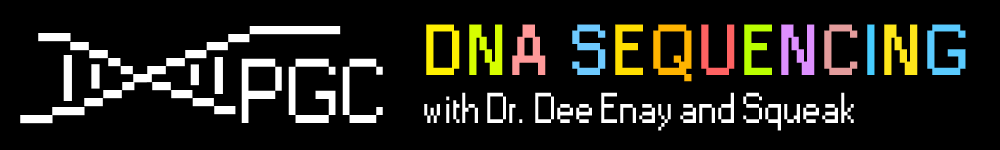
<style>
.page{position:relative;width:1000px;height:150px;background:#000000}
.page>*{position:absolute;margin:0}
.t1{font:40.4px "Small Fonts";color:#ffffff}
.t2{font:66.1px "Small Fonts";letter-spacing:0.1em;color:#fff000;font-weight:bold}
.t3{font:66.1px "Small Fonts";letter-spacing:0.1em;color:#d7fe00;font-weight:bold}
.t4{font:66.1px "Small Fonts";letter-spacing:0.1em;color:#ff9999;font-weight:bold}
.t5{font:66.1px "Small Fonts";letter-spacing:0.1em;color:#6ecaff;font-weight:bold}
.t6{font:66.1px "Small Fonts";letter-spacing:0.1em;color:#ffde00;font-weight:bold}
.t7{font:66.1px "Small Fonts";letter-spacing:0.1em;color:#ffb400;font-weight:bold}
.t8{font:66.1px "Small Fonts";letter-spacing:0.1em;color:#ff6262;font-weight:bold}
.t9{font:66.1px "Small Fonts";letter-spacing:0.1em;color:#baff00;font-weight:bold}
.t10{font:66.1px "Small Fonts";letter-spacing:0.1em;color:#de90ff;font-weight:bold}
.t11{font:66.1px "Small Fonts";letter-spacing:0.1em;color:#e39c9c;font-weight:bold}
.t12{font:66.1px "Small Fonts";letter-spacing:0.1em;color:#47cdff;font-weight:bold}
.t13{font:66.1px "Small Fonts";letter-spacing:0.1em;color:#ffe71a;font-weight:bold}
.t14{font:66.1px "Small Fonts";letter-spacing:0.1em;color:#5acbff;font-weight:bold}
.t15{font:85.7px "Small Fonts";color:#ffffff}
</style>
<div class="page">
<p class="t1" style="left:424px;top:24px;width:542px;height:107px"><span class="t2">D</span><span class="t3">N</span><span class="t4">A </span><span class="t5">S</span><span class="t6">E</span><span class="t7">Q</span><span class="t8">U</span><span class="t9">E</span><span class="t10">N</span><span class="t11">C</span><span class="t12">I</span><span class="t13">N</span><span class="t14">G<br></span>with Dr. Dee Enay and Squeak</p>
<p class="t15" style="left:241px;top:58px;width:142px;height:65px">PGC</p>
</div>
